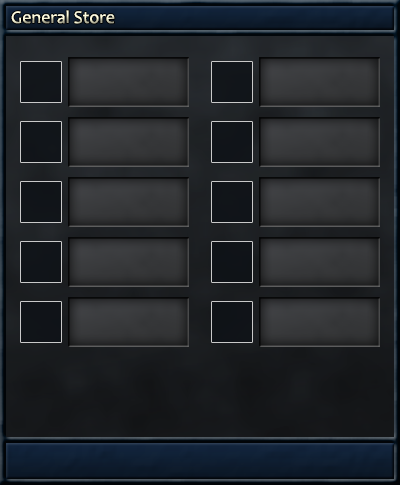
<style>
.page{position:relative;width:400px;height:485px}
.page>*{position:absolute;margin:0}
.t1{font:18px "Candara"}
</style>
<div class="page">
<p class="t1" style="left:11px;top:10px;width:104px;height:14px">General Store</p>
</div>
